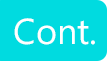
<style>
.page{position:relative;width:107px;height:61px;background:#00dbe0}
.page>*{position:absolute;margin:0}
.t1{font:36px "MicrosoftPhagsPa";color:#ffffff}
</style>
<div class="page">
<p class="t1" style="left:14px;top:18px;width:81px;height:27px">Cont.</p>
</div>
